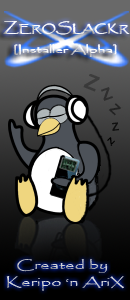
<style>
.page{position:relative;width:130px;height:300px}
.page>*{position:absolute;margin:0}
.t1{font:10.3px "Papyrus-Regular";scale:1.26 1}
.t2{font:14.3px "Papyrus-Regular";scale:1.26 1}
.t3{font:13.3px "Papyrus-Regular";scale:1.26 1}
.t4{font:10.3px "Papyrus-Regular";color:#ffffff;scale:1.26 1}
.t5{font:14.3px "Papyrus-Regular";color:#ffffff;scale:1.26 1}
.t6{font:13.3px "Papyrus-Regular";color:#ffffff;scale:1.26 1}
.t7{font:10.4px "Papyrus-Regular";scale:1.45 1}
.t8{font:10.4px "Papyrus-Regular";color:#ffffff;scale:1.45 1}
.t9{font:12px "Papyrus-Regular";color:#cecece;scale:1.52 1}
.t10{font:12px "Papyrus-Regular";color:#dfdfdf;scale:1.52 1}
</style>
<div class="page">
<p class="t1" style="left:3px;top:21px;width:126px;height:14px"><span class="t2">Z</span>ERO<span class="t3">S</span>LACKR</p>
<p class="t4" style="left:3px;top:21px;width:127px;height:14px"><span class="t5">Z</span>ERO<span class="t6">S</span>LACKR</p>
<p class="t7" style="left:13px;top:44px;width:103px;height:13px">[Installer Alpha]</p>
<p class="t8" style="left:14px;top:44px;width:103px;height:13px">[Installer Alpha]</p>
<p class="t9" style="left:17px;top:259px;width:91px;height:14px">Created by</p>
<p class="t10" style="left:6px;top:276px;width:118px;height:15px">Keripo ‘n AriX</p>
</div>
